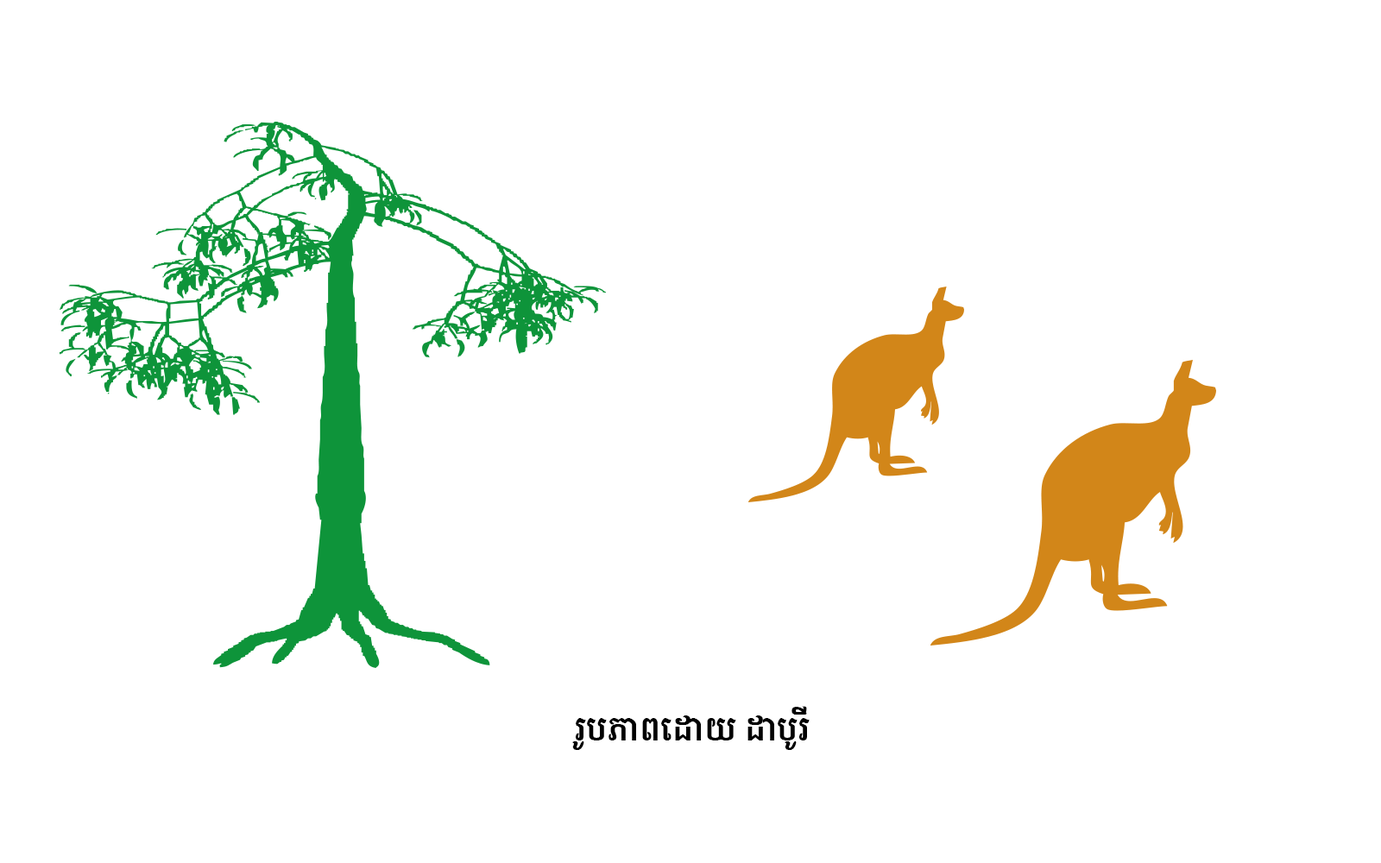
<style>
.page{position:relative;width:1381px;height:863px;background:#ffffff}
.page>*{position:absolute;margin:0}
.t1{font:34.5px "KohSantepheap-Bold";color:#000000}
</style>
<div class="page">
<p class="t1" style="left:572px;top:706px;width:238px;height:44px">រូបភាពេដោយ ដាបូរី</p>
</div>
